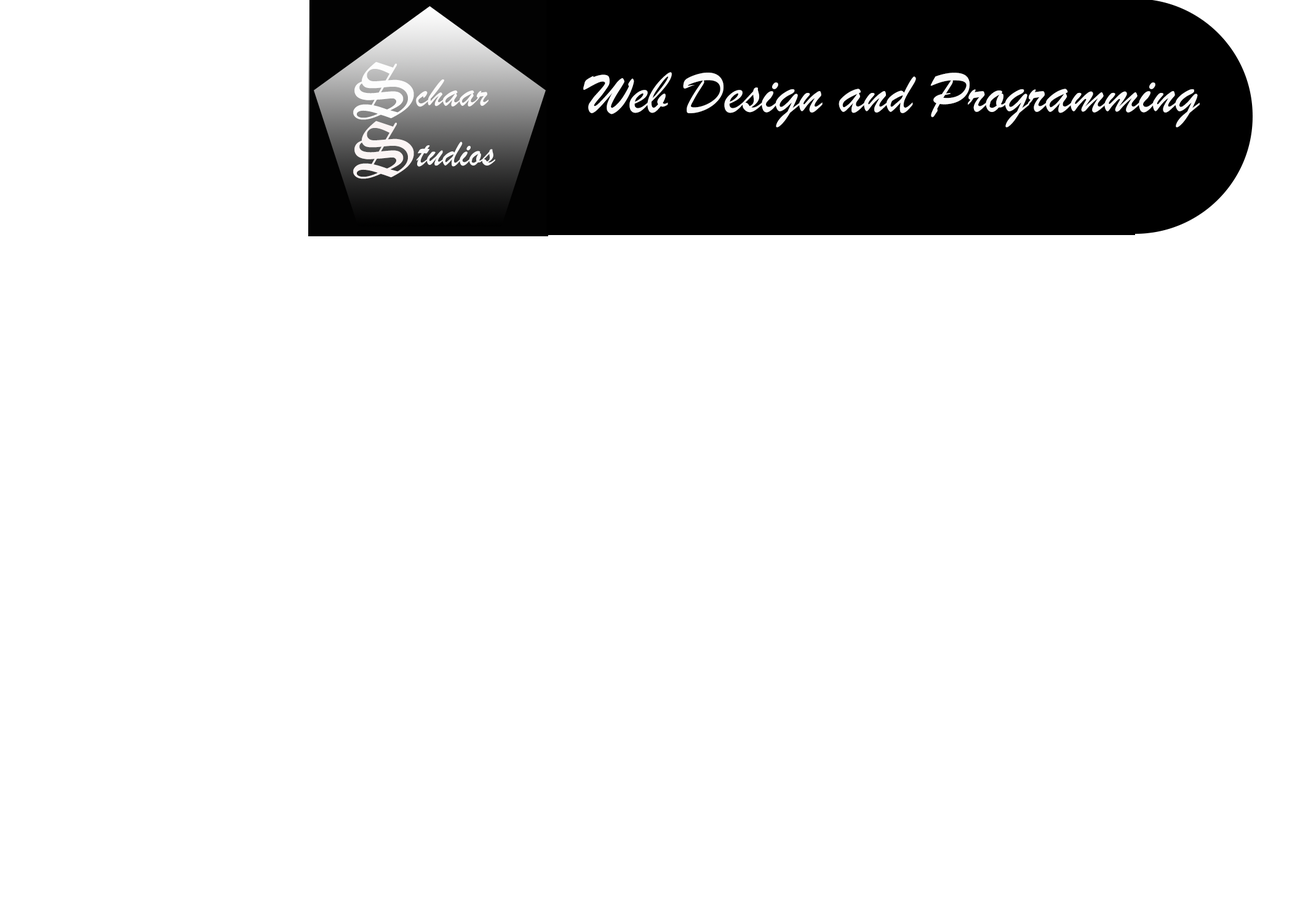
<style>
.page{position:relative;width:1292px;height:923px;background:#ffffff}
.page>*{position:absolute;margin:0}
.t1{font:76.9px "OldEnglishTextMT";color:#fdfdfd}
.t2{font:61.5px "BrushScriptMT";color:#fbfbfb}
.t3{font:41px "BrushScriptMT";color:#fdfbfb}
.t4{font:76.9px "OldEnglishTextMT";color:#fbf4f4}
.t5{font:41px "BrushScriptMT";color:#fbfbfb}
</style>
<div class="page">
<p class="t1" style="left:353px;top:62px;width:61px;height:58px">S</p>
<p class="t2" style="left:583px;top:72px;width:617px;height:55px">Web Design and Programming</p>
<p class="t3" style="left:416px;top:79px;width:73px;height:28px">chaar</p>
<p class="t4" style="left:353px;top:121px;width:61px;height:58px">S</p>
<p class="t5" style="left:417px;top:142px;width:78px;height:25px">tudios</p>
</div>
